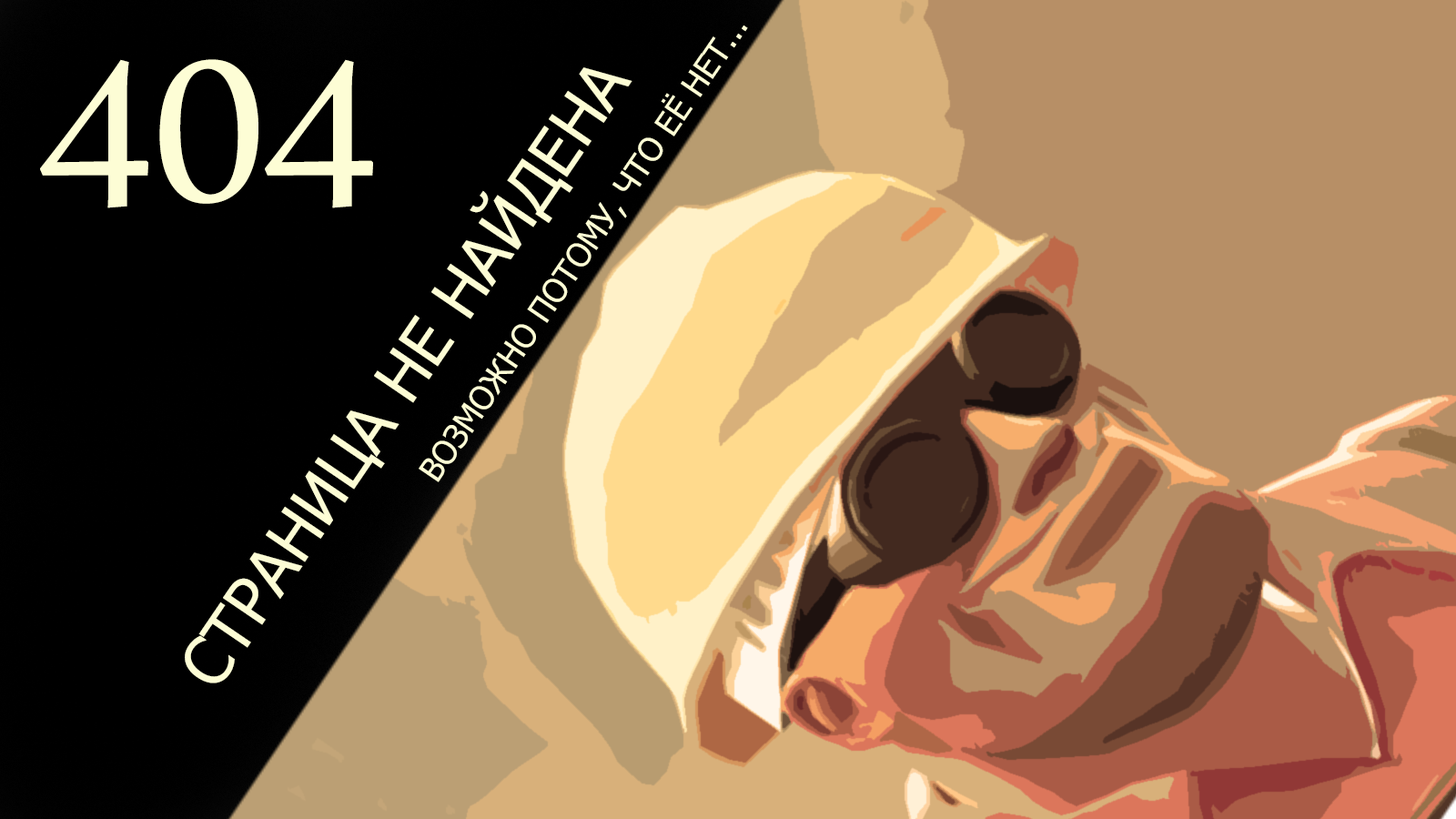
<style>
.page{position:relative;width:1456px;height:819px;background:#000000}
.page>*{position:absolute;margin:0}
.t1{font:32.8px/21.8px "Tahoma";color:#fdfdd5;text-transform:uppercase}
.t2{font:65.5px/21.8px "Tahoma";color:#fdfdd5;text-transform:uppercase}
.t3{font:338.5px "DaunPenh";color:#fdfdd5;text-transform:uppercase}
</style>
<div class="page">
<p class="t1" style="left:185px;top:25px;width:563px;height:658px;rotate:-56deg"><span class="t2">Страница не найдена<br><br><br></span>                             возможно потому, что её нет...</p>
<p class="t3" style="left:40px;top:59px;width:333px;height:149px">404</p>
</div>
